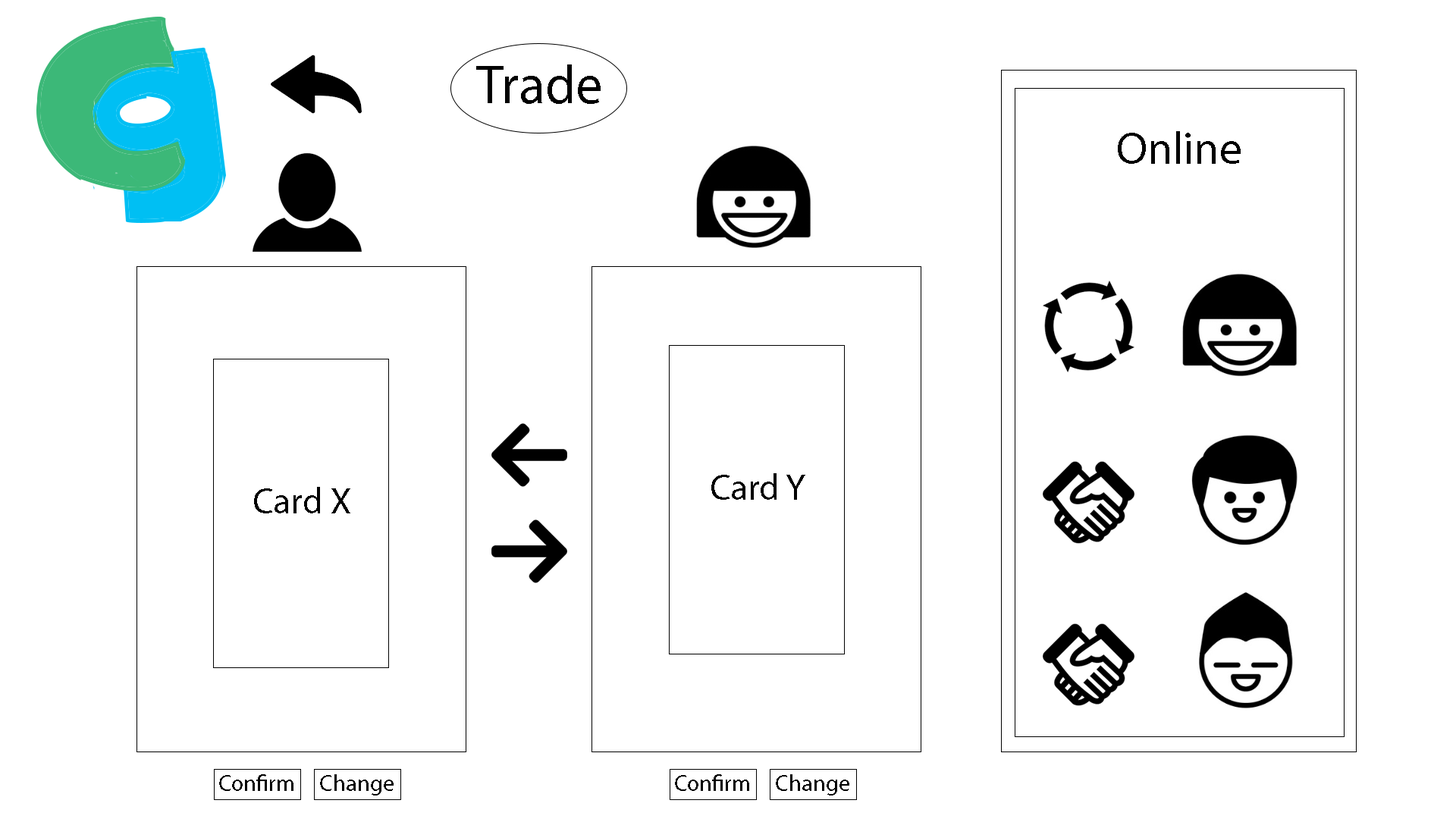
<style>
.page{position:relative;width:1456px;height:819px;background:#ffffff}
.page>*{position:absolute;margin:0}
.t1{font:54.6px "MyriadPro-Regular";color:#000000}
.t2{font:45.5px "MyriadPro-Regular";color:#000000}
.t3{font:36.4px "MyriadPro-Regular";color:#000000}
.t4{font:22.7px "MyriadPro-Regular";color:#000000}
</style>
<div class="page">
<p class="t1" style="left:476px;top:64px;width:125px;height:40px">Trade</p>
<p class="t2" style="left:1118px;top:131px;width:123px;height:33px">Online</p>
<p class="t3" style="left:711px;top:473px;width:94px;height:27px">Card Y</p>
<p class="t3" style="left:254px;top:487px;width:96px;height:26px">Card X</p>
<p class="t4" style="left:219px;top:774px;width:74px;height:17px">Confirm</p>
<p class="t4" style="left:320px;top:774px;width:74px;height:21px">Change</p>
<p class="t4" style="left:675px;top:774px;width:74px;height:17px">Confirm</p>
<p class="t4" style="left:776px;top:774px;width:73px;height:21px">Change</p>
</div>
